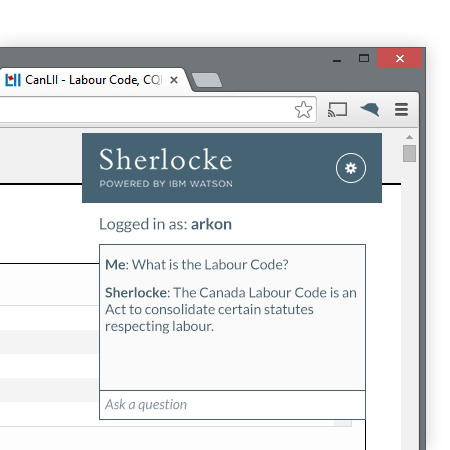
<style>
.page{position:relative;width:450px;height:450px;background:#ffffff}
.page>*{position:absolute;margin:0}
.t1{font:16px "Lato-Regular";color:#456373}
.t2{font:16px "Lato-Bold";color:#456373}
.t3{font:14px "Lato-Regular";color:#456373}
.t4{font:14px "Lato-Bold";color:#456373}
.t5{font:14px "Lato-Italic";color:#83939d}
</style>
<div class="page">
<p class="t1" style="left:100px;top:217px;width:132px;height:16px">Logged in as: <span class="t2">arkon</span></p>
<p class="t3" style="left:106px;top:259px;width:182px;height:11px"><span class="t4">Me</span>: What is the Labour Code?</p>
<p class="t3" style="left:105px;top:287px;width:251px;height:47px"><span class="t4">Sherlocke</span>: The Canada Labour Code is an Act to consolidate certain statutes respecting labour.</p>
<p class="t5" style="left:104px;top:399px;width:83px;height:13px">Ask a question</p>
</div>
